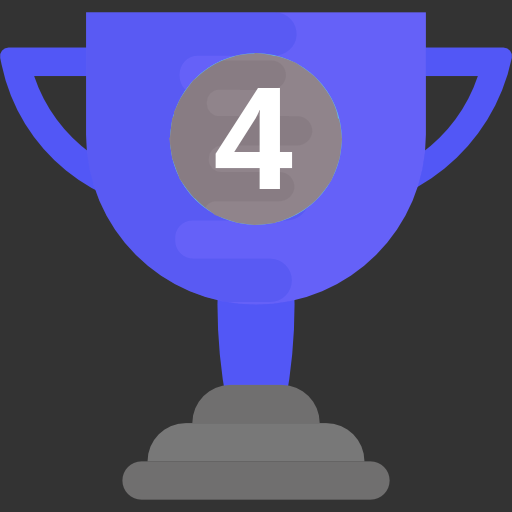
<style>
.page{position:relative;width:512px;height:512px;background:#333333}
.page>*{position:absolute;margin:0}
.t1{font:144.4px "MyanmarText-Bold";color:#ffffff}
</style>
<div class="page">
<p class="t1" style="left:215px;top:88px;width:78px;height:101px">4</p>
</div>
